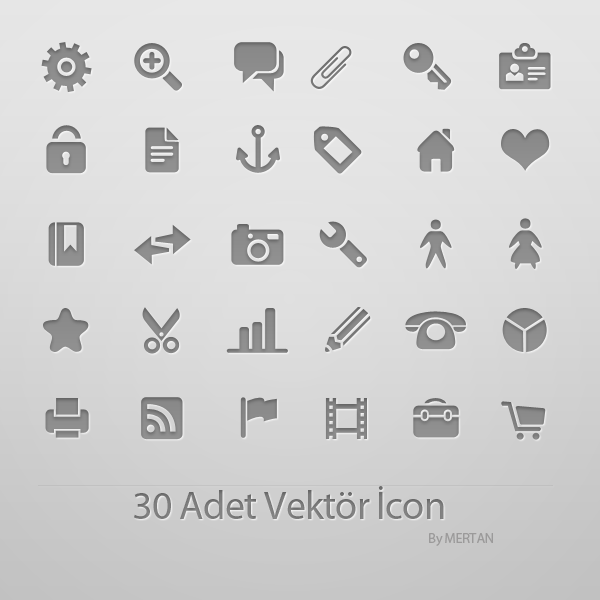
<style>
.page{position:relative;width:600px;height:600px}
.page>*{position:absolute;margin:0}
.t1{font:40px "MyriadPro-Regular";letter-spacing:-0.02em;color:#7d7d7d}
.t2{font:14px "MyriadPro-Regular";letter-spacing:-0.02em;color:#9b9a9a}
</style>
<div class="page">
<p class="t1" style="left:134px;top:486px;width:310px;height:33px">30 Adet Vektör İcon</p>
<p class="t2" style="left:429px;top:533px;width:64px;height:13px">By MERTAN</p>
</div>
